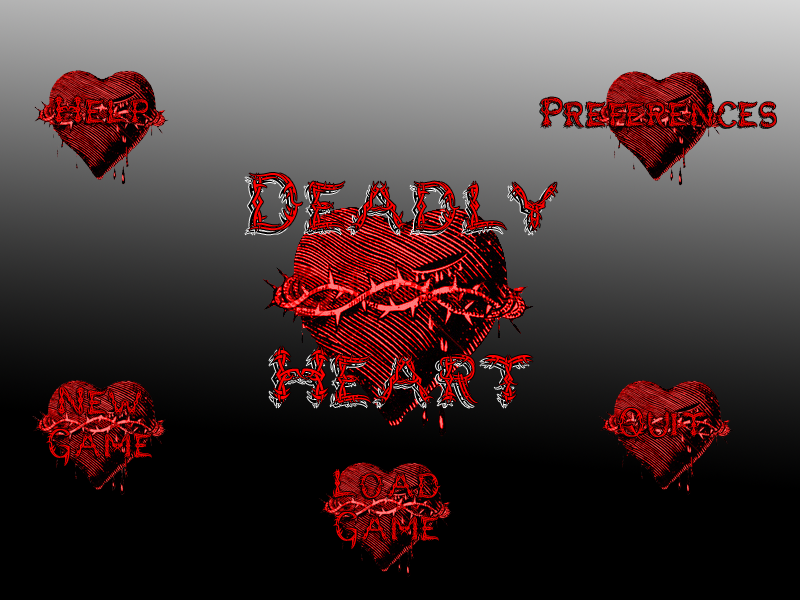
<style>
.page{position:relative;width:800px;height:600px;background:#000000}
.page>*{position:absolute;margin:0}
.t1{font:36px "LupusBlight";color:#ff0000}
.t2{font:36px "LupusBlight"}
.t3{font:72px "LupusBlight";color:#ff0000}
</style>
<div class="page">
<p class="t1" style="left:54px;top:95px;width:94px;height:29px">Help</p>
<p class="t2" style="left:539px;top:99px;width:235px;height:30px">Preferences</p>
<p class="t1" style="left:541px;top:97px;width:235px;height:30px">Preferences</p>
<p class="t3" style="left:249px;top:173px;width:309px;height:231px;text-align:center">Deadly <br><br>Heart</p>
<p class="t1" style="left:46px;top:386px;width:106px;height:80px;text-align:center">New Game</p>
<p class="t1" style="left:617px;top:407px;width:89px;height:35px">Quit</p>
<p class="t1" style="left:332px;top:469px;width:109px;height:80px;text-align:center">Load<br>Game</p>
</div>
